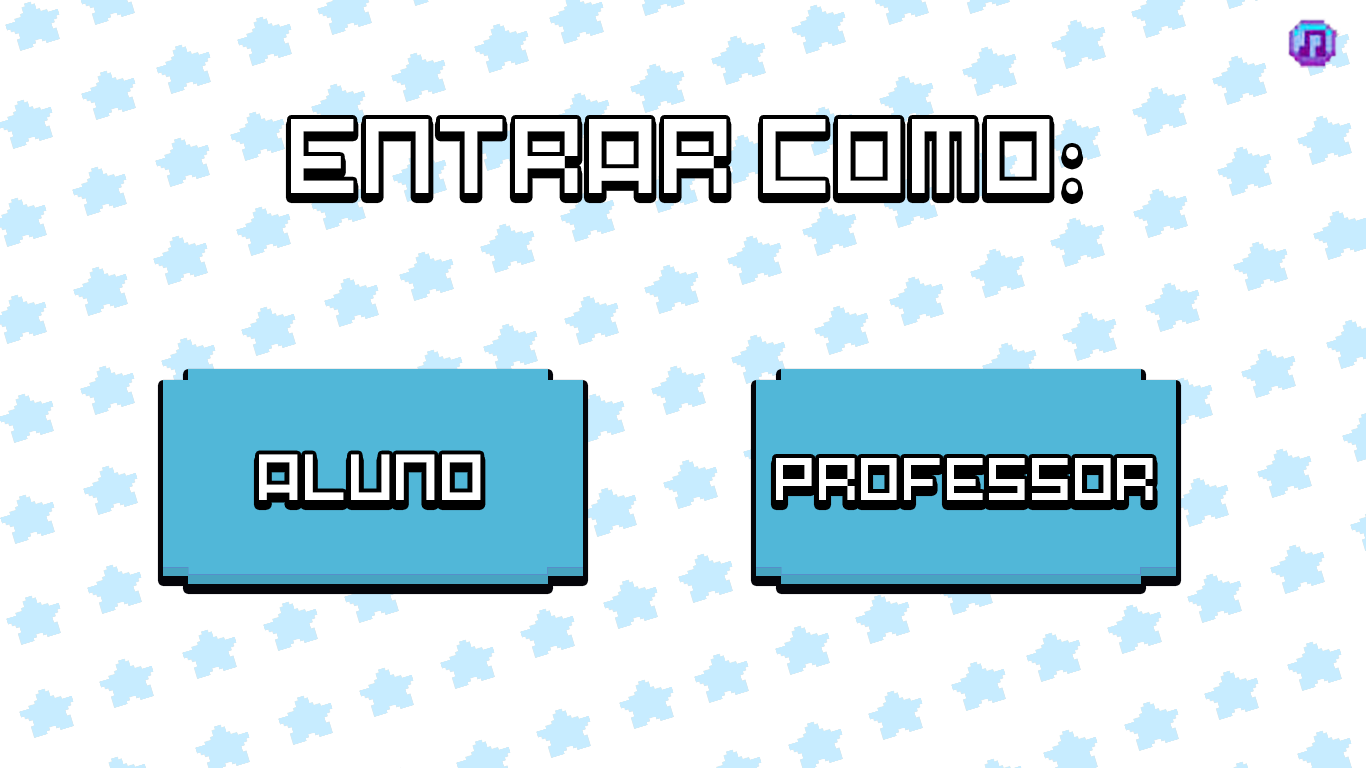
<style>
.page{position:relative;width:1366px;height:768px;background:#ffffff}
.page>*{position:absolute;margin:0}
.t1{font:98.7px "Pixel-Art";color:#ffffff}
.t2{font:98.7px "MyriadPro-Regular";color:#ffffff}
.t3{font:60.6px "Pixel-Art";color:#ffffff}
.t4{font:56px "Pixel-Art";color:#ffffff}
</style>
<div class="page">
<p class="t1" style="left:291px;top:119px;width:787px;height:75px"><span class="t2">:</span>ENTRAR COMO</p>
<p class="t3" style="left:259px;top:454px;width:222px;height:46px">ALUNO</p>
<p class="t4" style="left:776px;top:458px;width:377px;height:42px">PROFESSOR</p>
</div>
